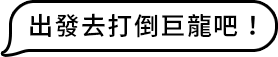
<style>
.page{position:relative;width:278px;height:57px;background:#ffffff}
.page>*{position:absolute;margin:0}
.t1{font:25px "NotoSansCJKtc-Medium";letter-spacing:0.06em;color:#000000}
</style>
<div class="page">
<p class="t1" style="left:30px;top:13px;width:225px;height:25px">出發去打倒巨龍吧！</p>
</div>
